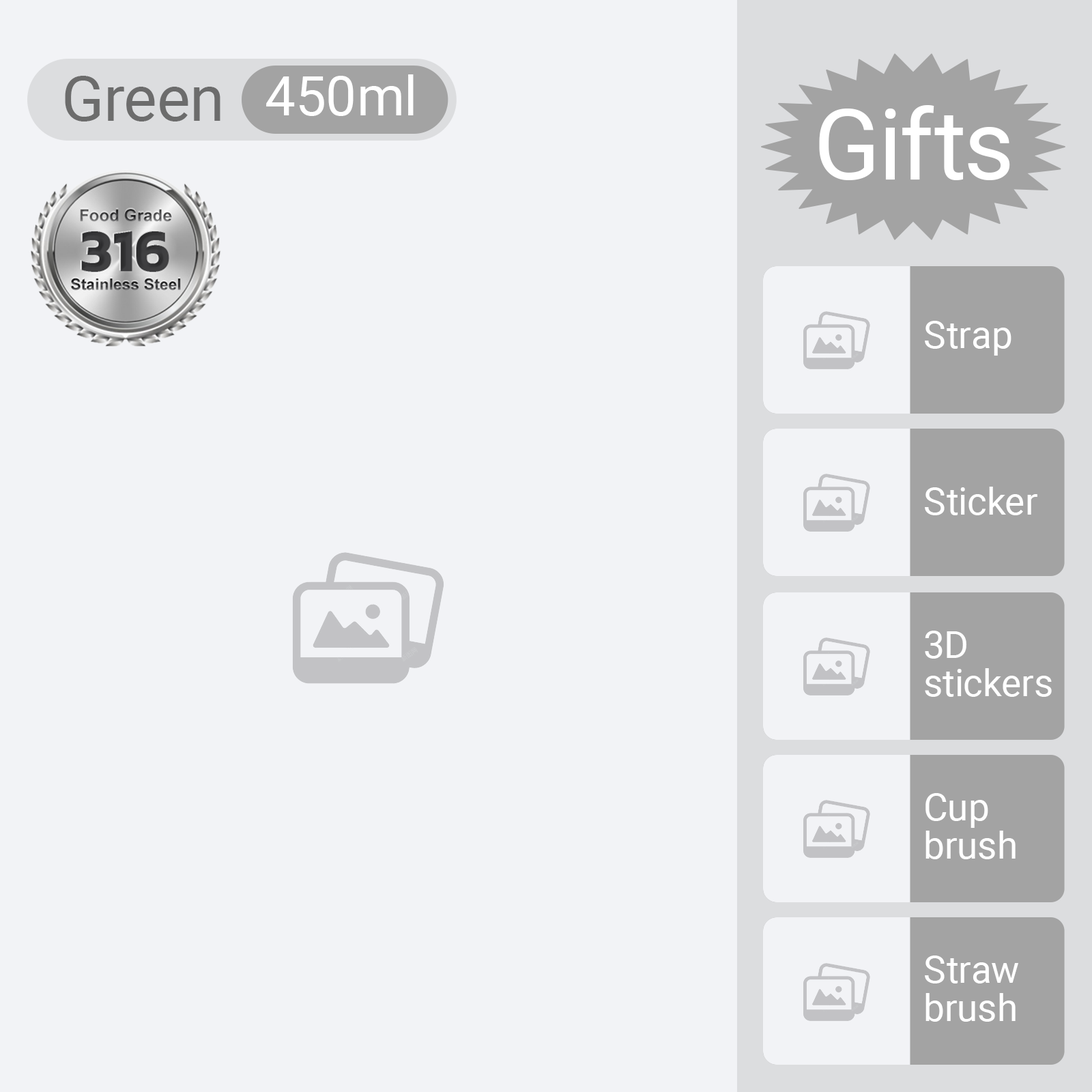
<style>
.page{position:relative;width:1092px;height:1092px;background:#f2f3f6}
.page>*{position:absolute;margin:0}
.t1{font:62.8px "Roboto-Regular";color:#6c6c6c}
.t2{font:54.6px "Roboto-Regular";color:#ffffff}
.t3{font:98.3px "Roboto-Regular";color:#ffffff}
.t4{font:37.9px "Roboto-Regular";color:#ffffff}
.t5{font:37.9px/38.2px "Roboto-Regular";color:#ffffff}
</style>
<div class="page">
<p class="t1" style="left:65px;top:76px;width:155px;height:45px">Green</p>
<p class="t2" style="left:266px;top:74px;width:148px;height:42px">450ml</p>
<p class="t3" style="left:819px;top:105px;width:191px;height:75px">Gifts</p>
<p class="t4" style="left:925px;top:321px;width:86px;height:35px">Strap</p>
<p class="t4" style="left:925px;top:487px;width:112px;height:28px">Sticker</p>
<p class="t5" style="left:925px;top:631px;width:127px;height:66px">3D <br>stickers</p>
<p class="t5" style="left:925px;top:793px;width:91px;height:66px">Cup <br>brush</p>
<p class="t5" style="left:925px;top:955px;width:93px;height:67px">Straw <br>brush</p>
</div>
